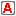
<style>
.page{position:relative;width:16px;height:16px;background:#ffffff}
.page>*{position:absolute;margin:0}
.t1{font:14px "Arial-BoldMT";color:#ff0000;scale:1.04 1}
</style>
<div class="page">
<p class="t1" style="left:3px;top:3px;width:9px;height:10px">A</p>
</div>
